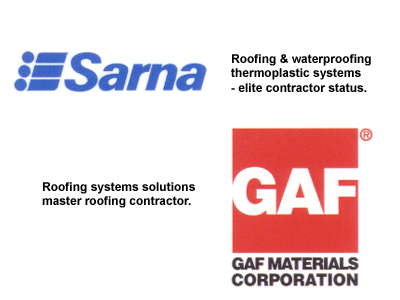
<style>
.page{position:relative;width:400px;height:300px;background:#ffffff}
.page>*{position:absolute;margin:0}
.t1{font:12px "Arial-BoldMT";color:#000000}
</style>
<div class="page">
<p class="t1" style="left:231px;top:54px;width:140px;height:38px">Roofing &amp; waterproofing<br>thermoplastic systems<br>- elite contractor status.</p>
<p class="t1" style="left:42px;top:182px;width:153px;height:26px">Roofing systems solutions<br>master roofing contractor.</p>
</div>
